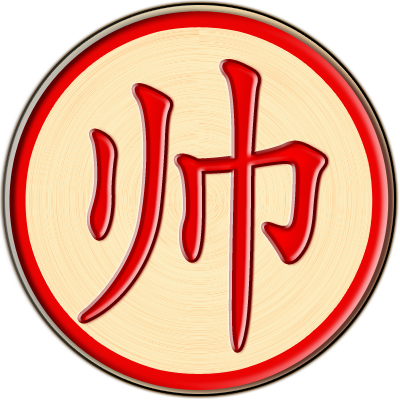
<style>
.page{position:relative;width:400px;height:400px;background:#ffffff}
.page>*{position:absolute;margin:0}
.t1{font:318px "AdobeKaitiStd-Regular"}
</style>
<div class="page">
<p class="t1" style="left:80px;top:62px;width:245px;height:288px">帅</p>
</div>
